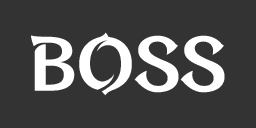
<style>
.page{position:relative;width:256px;height:128px;background:#333333}
.page>*{position:absolute;margin:0}
.t1{font:72px "DNFForgedBlade-Bold";color:#ffffff}
</style>
<div class="page">
<p class="t1" style="left:31px;top:32px;width:194px;height:64px">BOSS</p>
</div>
